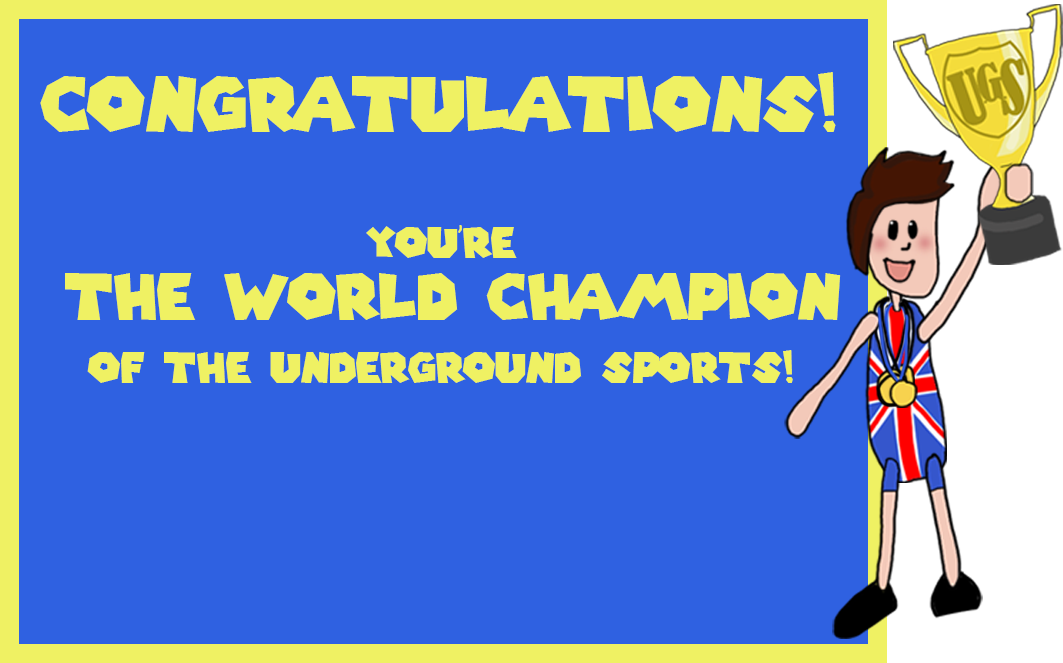
<style>
.page{position:relative;width:1063px;height:663px;background:#2f61e1}
.page>*{position:absolute;margin:0}
.t1{font:41.7px/62.7px "SuperMarioGalaxy";color:#eff163}
.t2{font:75px/62.7px "SuperMarioGalaxy";color:#eff163}
.t3{font:62.5px/62.7px "SuperMarioGalaxy";color:#eff163}
</style>
<div class="page">
<p class="t1" style="left:40px;top:72px;width:801px;height:311px;text-align:center"><span class="t2">Congratulations!<br><br></span>You’re<br> <span class="t3">the world champion <br></span>of the underground sports!</p>
</div>
